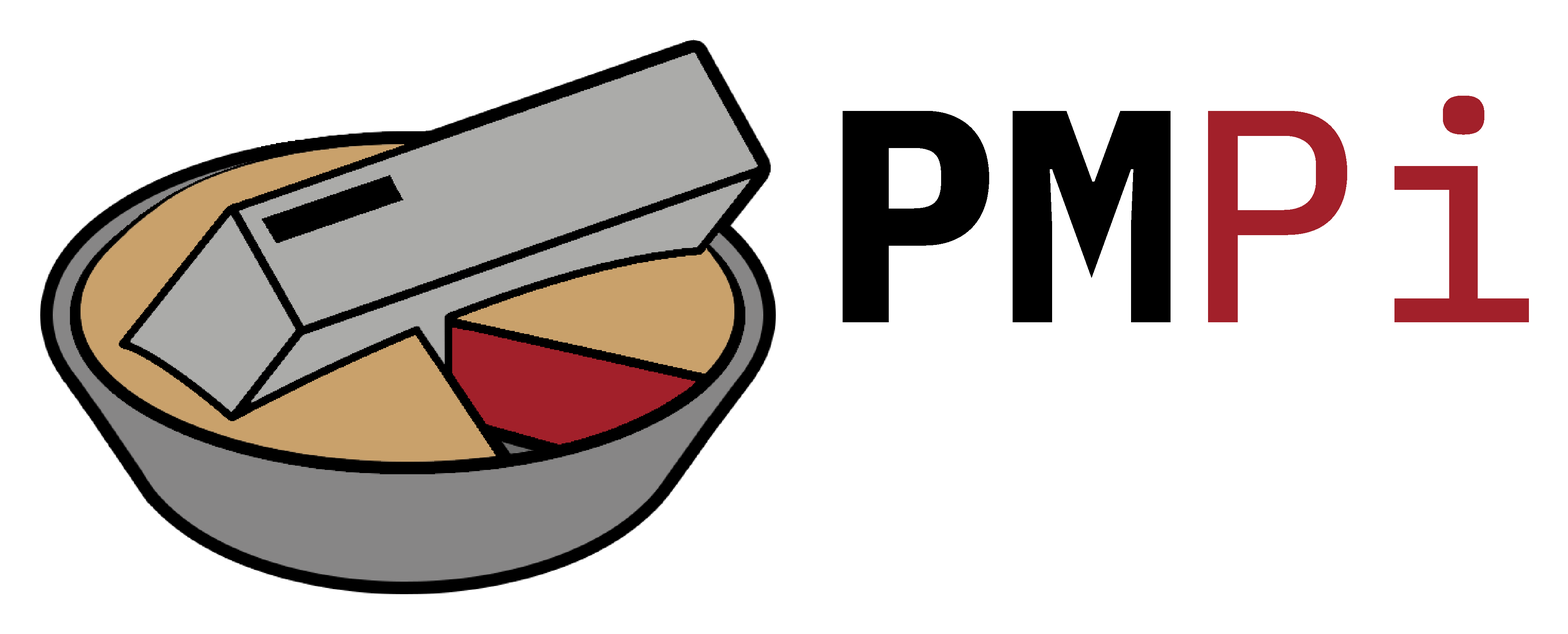
<style>
.page{position:relative;width:1568px;height:634px;background:#ffffff}
.page>*{position:absolute;margin:0}
.t1{font:301.9px "IBMPlexMono-Text"}
.t2{font:301.9px "IBMPlexMono-Bold";color:#000000}
</style>
<div class="page">
<p class="t1" style="left:846px;top:96px;width:683px;height:226px">PMPi</p>
<p class="t2" style="left:843px;top:111px;width:328px;height:211px">PM</p>
</div>
